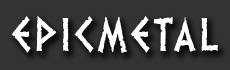
<style>
.page{position:relative;width:230px;height:70px;background:#333333}
.page>*{position:absolute;margin:0}
.t1{font:39.6px "Dalek";letter-spacing:0.075em;color:#fefefe;scale:0.91 1}
</style>
<div class="page">
<p class="t1" style="left:11px;top:16px;width:207px;height:37px">EPICMETAL</p>
</div>
